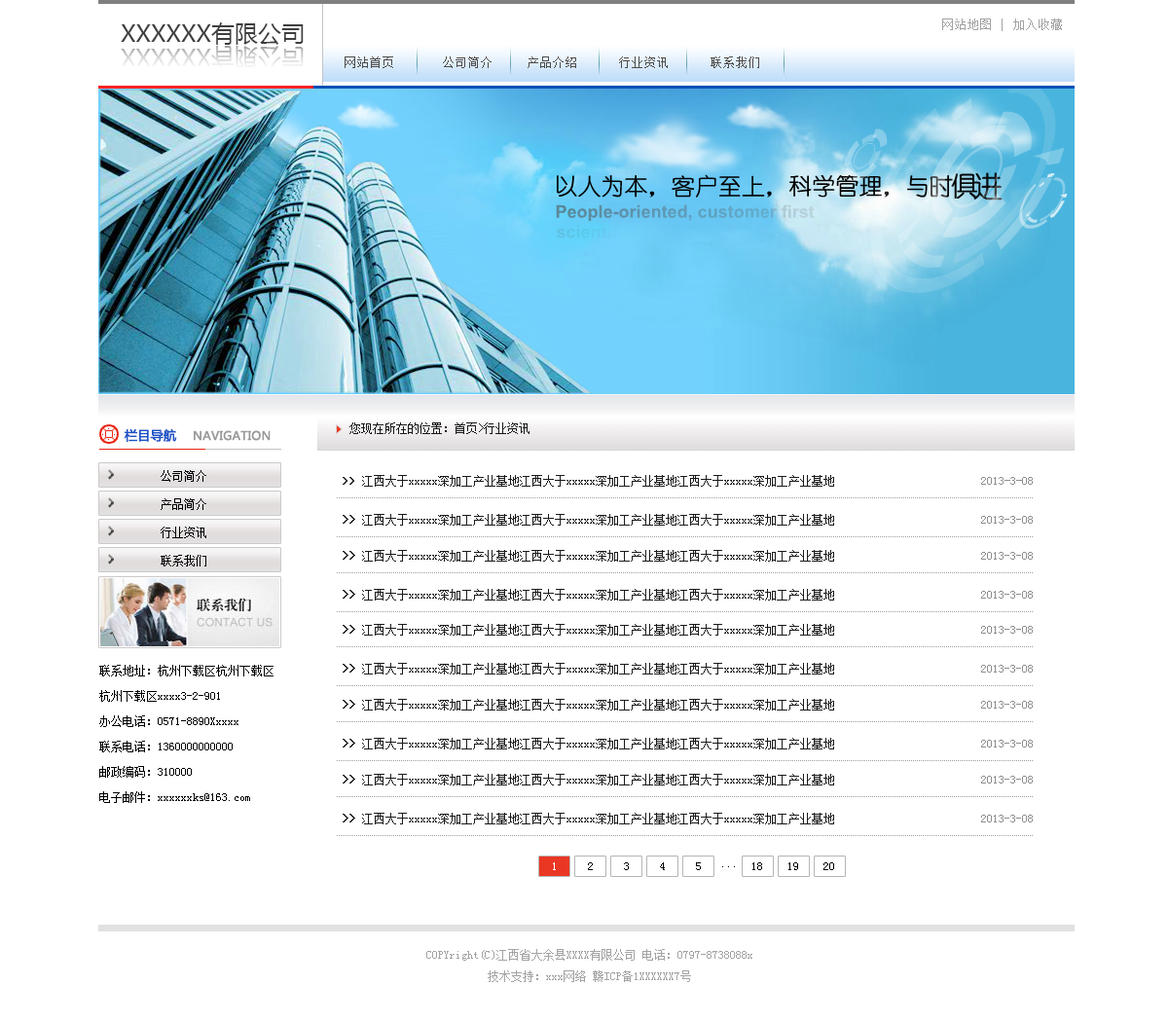
<style>
.page{position:relative;width:1168px;height:1021px;background:#ffffff}
.page>*{position:absolute;margin:0}
.t1{font:23.4px "MicrosoftYaHei";color:#3f3f3f}
.t2{font:12.7px "SimSun";color:#a3a2a2}
.t3{font:23.4px "MicrosoftYaHei"}
.t4{font:12.7px "SimSun";color:#4d4c4c}
.t5{font:11.7px "SimSun";color:#191919}
.t6{font:11.7px "MicrosoftYaHei";color:#9a9a9a;font-weight:bold}
.t7{font:12.7px "MicrosoftYaHei";color:#1952c6;font-weight:bold}
.t8{font:11.7px "SimSun";color:#000000}
.t9{font:11.7px "SimSun";color:#191919;font-weight:bold}
.t10{font:11.7px "SimSun";color:#8e8d8d}
.t11{font:11.7px/25.3px "SimSun";color:#000000}
.t12{font:11.7px "SimSun";color:#ffffff}
.t13{font:11.7px/21.4px "SimSun";color:#a4a2a2}
</style>
<div class="page">
<p class="t1" style="left:121px;top:22px;width:183px;height:23px">XXXXXX有限公司</p>
<p class="t2" style="left:942px;top:18px;width:120px;height:13px">网站地图 | 加入收藏</p>
<p class="t3" style="left:121px;top:46px;width:183px;height:22px">XXXXXX有限公司</p>
<p class="t4" style="left:345px;top:56px;width:414px;height:12px">网站首页       公司简介     产品介绍      行业资讯      联系我们</p>
<p class="t5" style="left:349px;top:422px;width:180px;height:12px">您现在所在的位置：首页&gt;行业资讯</p>
<p class="t6" style="left:124px;top:428px;width:147px;height:14px"><span class="t7">栏目导航    </span>NAVIGATION</p>
<p class="t8" style="left:161px;top:470px;width:45px;height:12px">公司简介</p>
<p class="t5" style="left:343px;top:475px;width:690px;height:12px"><span class="t9">&gt;&gt; </span>江西大于xxxxx深加工产业基地江西大于xxxxx深加工产业基地江西大于xxxxx深加工产业基地                         <span class="t10">2013-3-08</span></p>
<p class="t8" style="left:161px;top:498px;width:45px;height:12px">产品简介</p>
<p class="t5" style="left:343px;top:514px;width:690px;height:12px"><span class="t9">&gt;&gt; </span>江西大于xxxxx深加工产业基地江西大于xxxxx深加工产业基地江西大于xxxxx深加工产业基地                         <span class="t10">2013-3-08</span></p>
<p class="t8" style="left:161px;top:527px;width:45px;height:11px">行业资讯</p>
<p class="t8" style="left:161px;top:555px;width:45px;height:11px">联系我们</p>
<p class="t5" style="left:343px;top:550px;width:690px;height:12px"><span class="t9">&gt;&gt; </span>江西大于xxxxx深加工产业基地江西大于xxxxx深加工产业基地江西大于xxxxx深加工产业基地                         <span class="t10">2013-3-08</span></p>
<p class="t5" style="left:343px;top:589px;width:690px;height:12px"><span class="t9">&gt;&gt; </span>江西大于xxxxx深加工产业基地江西大于xxxxx深加工产业基地江西大于xxxxx深加工产业基地                         <span class="t10">2013-3-08</span></p>
<p class="t5" style="left:343px;top:624px;width:690px;height:12px"><span class="t9">&gt;&gt; </span>江西大于xxxxx深加工产业基地江西大于xxxxx深加工产业基地江西大于xxxxx深加工产业基地                         <span class="t10">2013-3-08</span></p>
<p class="t11" style="left:99px;top:665px;width:174px;height:138px">联系地址：杭州下载区杭州下载区<br>杭州下载区xxxx3-2-901<br>办公电话：0571-8890Xxxxx<br>联系电话：1360000000000<br>邮政编码：310000<br>电子邮件：xxxxxxks@163.com</p>
<p class="t5" style="left:343px;top:663px;width:690px;height:11px"><span class="t9">&gt;&gt; </span>江西大于xxxxx深加工产业基地江西大于xxxxx深加工产业基地江西大于xxxxx深加工产业基地                         <span class="t10">2013-3-08</span></p>
<p class="t5" style="left:343px;top:699px;width:690px;height:11px"><span class="t9">&gt;&gt; </span>江西大于xxxxx深加工产业基地江西大于xxxxx深加工产业基地江西大于xxxxx深加工产业基地                         <span class="t10">2013-3-08</span></p>
<p class="t5" style="left:343px;top:738px;width:690px;height:11px"><span class="t9">&gt;&gt; </span>江西大于xxxxx深加工产业基地江西大于xxxxx深加工产业基地江西大于xxxxx深加工产业基地                         <span class="t10">2013-3-08</span></p>
<p class="t5" style="left:343px;top:774px;width:690px;height:11px"><span class="t9">&gt;&gt; </span>江西大于xxxxx深加工产业基地江西大于xxxxx深加工产业基地江西大于xxxxx深加工产业基地                         <span class="t10">2013-3-08</span></p>
<p class="t5" style="left:343px;top:813px;width:690px;height:11px"><span class="t9">&gt;&gt; </span>江西大于xxxxx深加工产业基地江西大于xxxxx深加工产业基地江西大于xxxxx深加工产业基地                         <span class="t10">2013-3-08</span></p>
<p class="t12" style="left:553px;top:862px;width:3px;height:8px">1</p>
<p class="t8" style="left:588px;top:862px;width:5px;height:8px">2</p>
<p class="t8" style="left:624px;top:862px;width:5px;height:8px">3</p>
<p class="t8" style="left:660px;top:862px;width:5px;height:8px">4</p>
<p class="t8" style="left:696px;top:862px;width:5px;height:8px">5</p>
<p class="t8" style="left:722px;top:866px;width:13px;height:1px">...</p>
<p class="t8" style="left:752px;top:862px;width:10px;height:8px">18</p>
<p class="t8" style="left:788px;top:862px;width:10px;height:8px">19</p>
<p class="t8" style="left:823px;top:862px;width:11px;height:8px">20</p>
<p class="t13" style="left:426px;top:949px;width:326px;height:33px;text-align:center">COPYright(C)江西省大余县XXXX有限公司 电话：0797-8738088x<br>技术支持：xxx网络 赣ICP备1XXXXXX7号</p>
</div>
